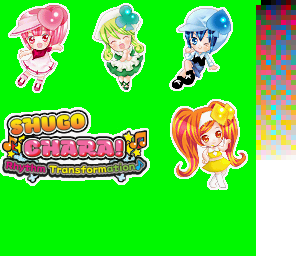
<style>
.page{position:relative;width:296px;height:256px;background:#00f800}
.page>*{position:absolute;margin:0}
.t1{font:21.9px "Blocker-DubLowFive";letter-spacing:-0.025em;text-transform:uppercase;scale:1.05 1}
.t2{font:21.9px "Blocker-DubLowFive";letter-spacing:0.025em;text-transform:uppercase;scale:1.05 1}
.t3{font:24px "Blocker-DubLowSix";color:#f068a0;text-transform:uppercase;scale:0.84 1}
.t4{font:13px "DFTFLeiShoStd-W5";color:#f8f000;scale:0.77 1}
.t5{font:13px "DFTFLeiShoStd-W5";color:#e80080;scale:0.77 1}
.t6{font:13px "DFTFLeiShoStd-W5";color:#88c040;scale:0.77 1}
.t7{font:10px "PressStart2P-Regular";color:#00b0f8;scale:0.9 1}
</style>
<div class="page">
<p class="t1" style="left:10px;top:113px;width:75px;height:22px;rotate:-6deg"><span class="t2">S</span>hugo</p>
<p class="t3" style="left:24px;top:140px;width:99px;height:17px">chara!</p>
<p class="t4" style="left:6px;top:160px;width:138px;height:14px"><span class="t5">Rhythm </span>Transform<span class="t6">ation</span><span class="t7">♪</span></p>
</div>
